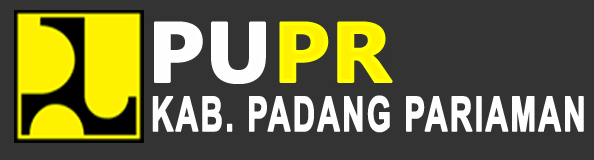
<style>
.page{position:relative;width:594px;height:160px;background:#333333}
.page>*{position:absolute;margin:0}
.t1{font:84.5px "LaoUI-Bold";color:#fefefe;font-weight:bold;scale:1.07 1}
.t2{font:84.5px "LaoUI-Bold";color:#fff200;font-weight:bold;scale:1.07 1}
.t3{font:47.8px "Arial-BoldMT";letter-spacing:0.05em;color:#fefefe;font-weight:bold;scale:0.65 1}
</style>
<div class="page">
<p class="t1" style="left:154px;top:21px;width:239px;height:63px">PU<span class="t2">PR</span></p>
<p class="t3" style="left:152px;top:95px;width:432px;height:38px">KAB. PADANG PARIAMAN</p>
</div>
